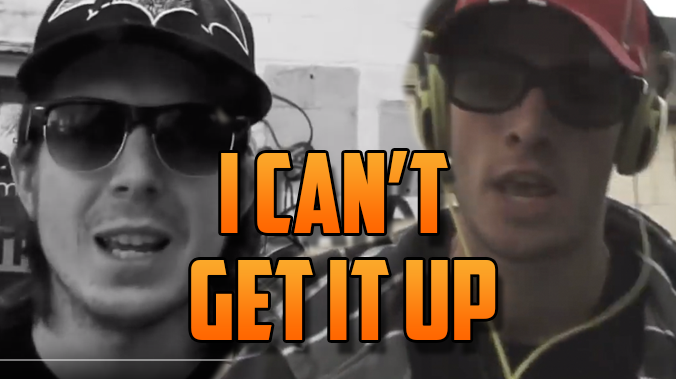
<style>
.page{position:relative;width:676px;height:379px}
.page>*{position:absolute;margin:0}
.t1{font:110px "AmericanCaptain"}
</style>
<div class="page">
<p class="t1" style="left:221px;top:151px;width:227px;height:82px">I can’t</p>
<p class="t1" style="left:191px;top:260px;width:305px;height:80px">get it up</p>
</div>
